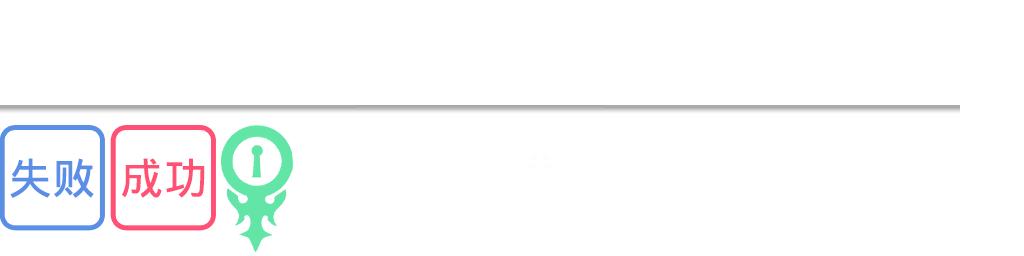
<style>
.page{position:relative;width:1024px;height:256px;background:#ffffff}
.page>*{position:absolute;margin:0}
.t1{font:42.7px "WenQuanYiMicroHeiMono";color:#5a8ee7;font-weight:bold}
.t2{font:42.7px "WenQuanYiMicroHeiMono";color:#ff5173;font-weight:bold}
</style>
<div class="page">
<p class="t1" style="left:10px;top:158px;width:84px;height:40px">失败</p>
<p class="t2" style="left:122px;top:158px;width:83px;height:40px">成功</p>
</div>
